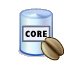
<style>
.page{position:relative;width:75px;height:66px;background:#ffffff}
.page>*{position:absolute;margin:0}
.t1{font:9px "Humanist521BT-XtraBoldCondensed";letter-spacing:0.05em;color:#000000;font-variant:small-caps}
</style>
<div class="page">
<p class="t1" style="left:25px;top:30px;width:22px;height:7px">CORE</p>
</div>
